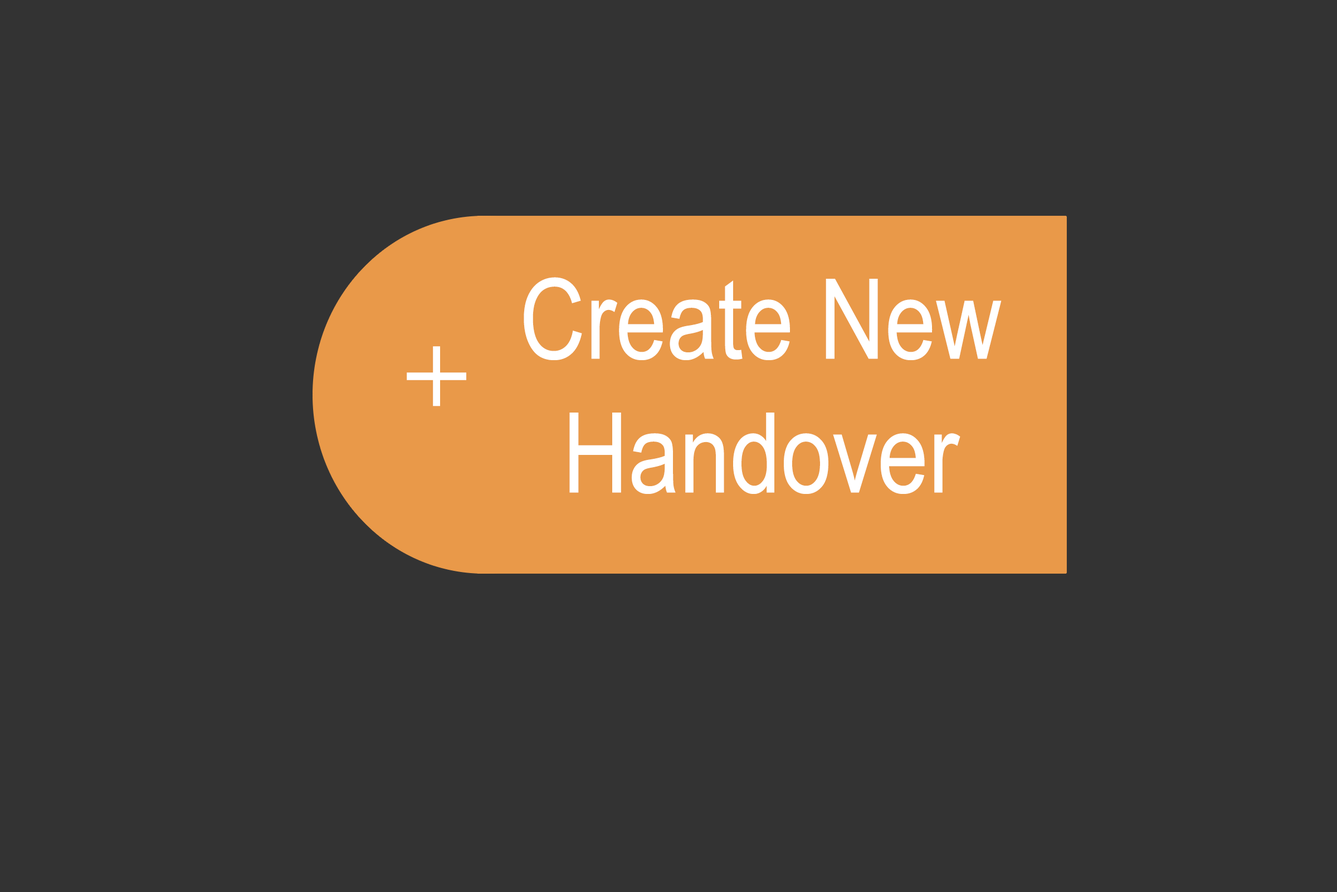
<style>
.page{position:relative;width:1337px;height:892px;background:#333333}
.page>*{position:absolute;margin:0}
.t1{font:111.5px "ArialNarrow";color:#ffffff}
.t2{font:111.5px "TimesNewRomanPS-BoldMT";color:#ffffff}
</style>
<div class="page">
<p class="t1" style="left:524px;top:277px;width:478px;height:217px;text-align:center">Create New<br>Handover</p>
<p class="t2" style="left:407px;top:346px;width:59px;height:60px">+</p>
</div>
